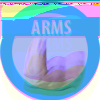
<style>
.page{position:relative;width:100px;height:100px}
.page>*{position:absolute;margin:0}
.t1{font:20.8px "MyriadPro-BoldCond";color:#aaaefe}
</style>
<div class="page">
<p class="t1" style="left:31px;top:19px;width:40px;height:14px">ARMS</p>
</div>
